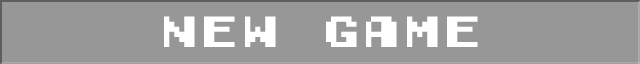
<style>
.page{position:relative;width:640px;height:64px;background:#979797}
.page>*{position:absolute;margin:0}
.t1{font:40.5px "GamegirlClassic";color:#ffffff}
</style>
<div class="page">
<p class="t1" style="left:164px;top:16px;width:314px;height:31px">new game</p>
</div>
